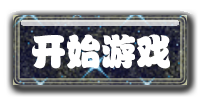
<style>
.page{position:relative;width:200px;height:100px;background:#ffffff}
.page>*{position:absolute;margin:0}
.t1{font:36.1px "FZPWK--GBK1-0";color:#ffffff}
</style>
<div class="page">
<p class="t1" style="left:32px;top:34px;width:138px;height:35px">开始游戏</p>
</div>
